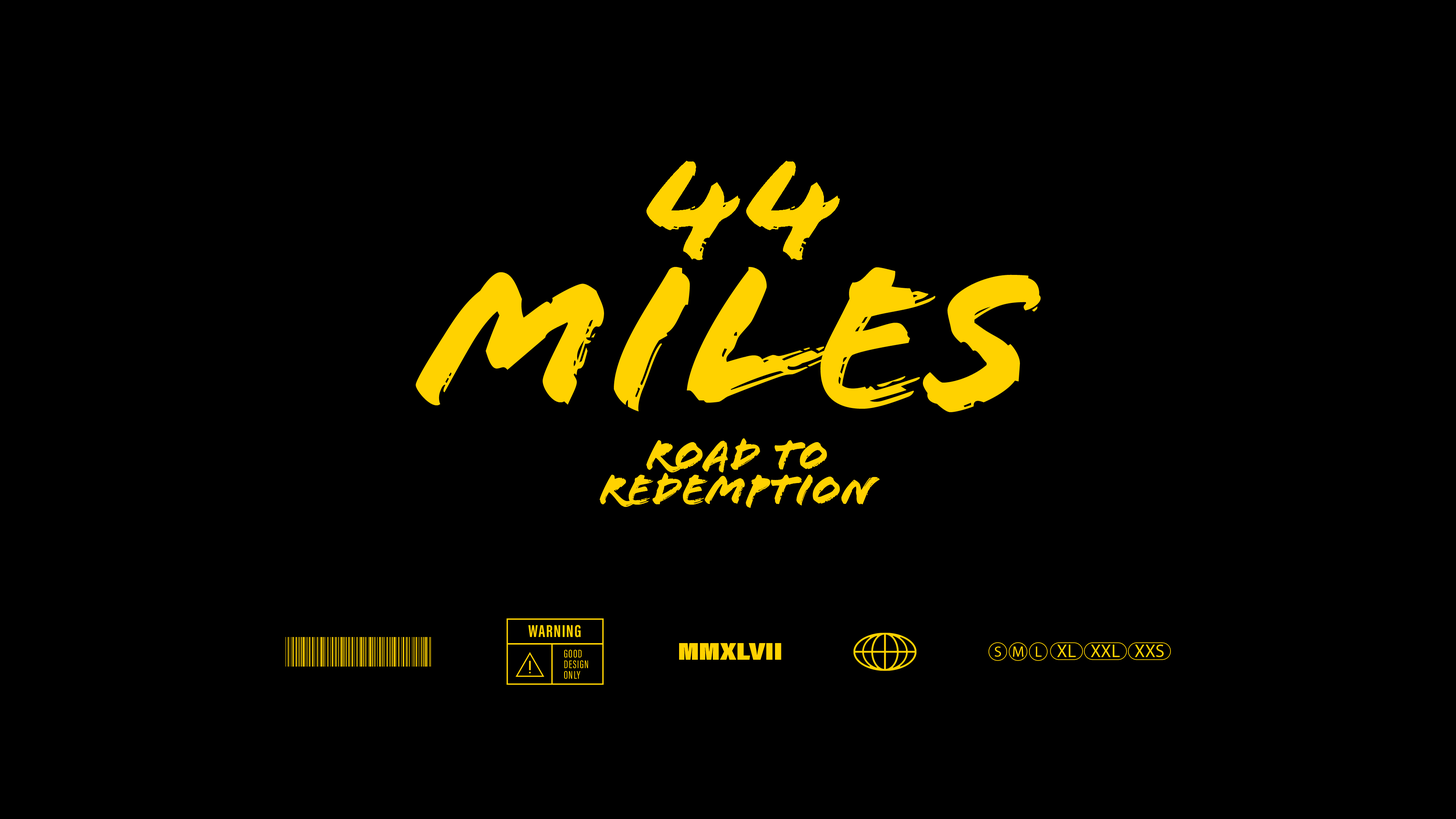
<style>
.page{position:relative;width:1456px;height:819px;background:#000000}
.page>*{position:absolute;margin:0}
.t1{font:144.5px "FloodStd";color:#ffd200}
.t2{font:214px "FloodStd";color:#ffd200}
.t3{font:45.5px/12.3px "FloodStd";color:#ffd200}
.t4{font:23.8px "AcuminProSemiCond-UltraBlack";color:#ffd200}
</style>
<div class="page">
<p class="t1" style="left:646px;top:161px;width:194px;height:99px">44</p>
<p class="t2" style="left:416px;top:267px;width:625px;height:145px">MILES</p>
<p class="t3" style="left:599px;top:438px;width:281px;height:70px;text-align:center">road to<br>redemption</p>
<p class="t4" style="left:679px;top:643px;width:102px;height:17px">MMXLVII</p>
</div>
